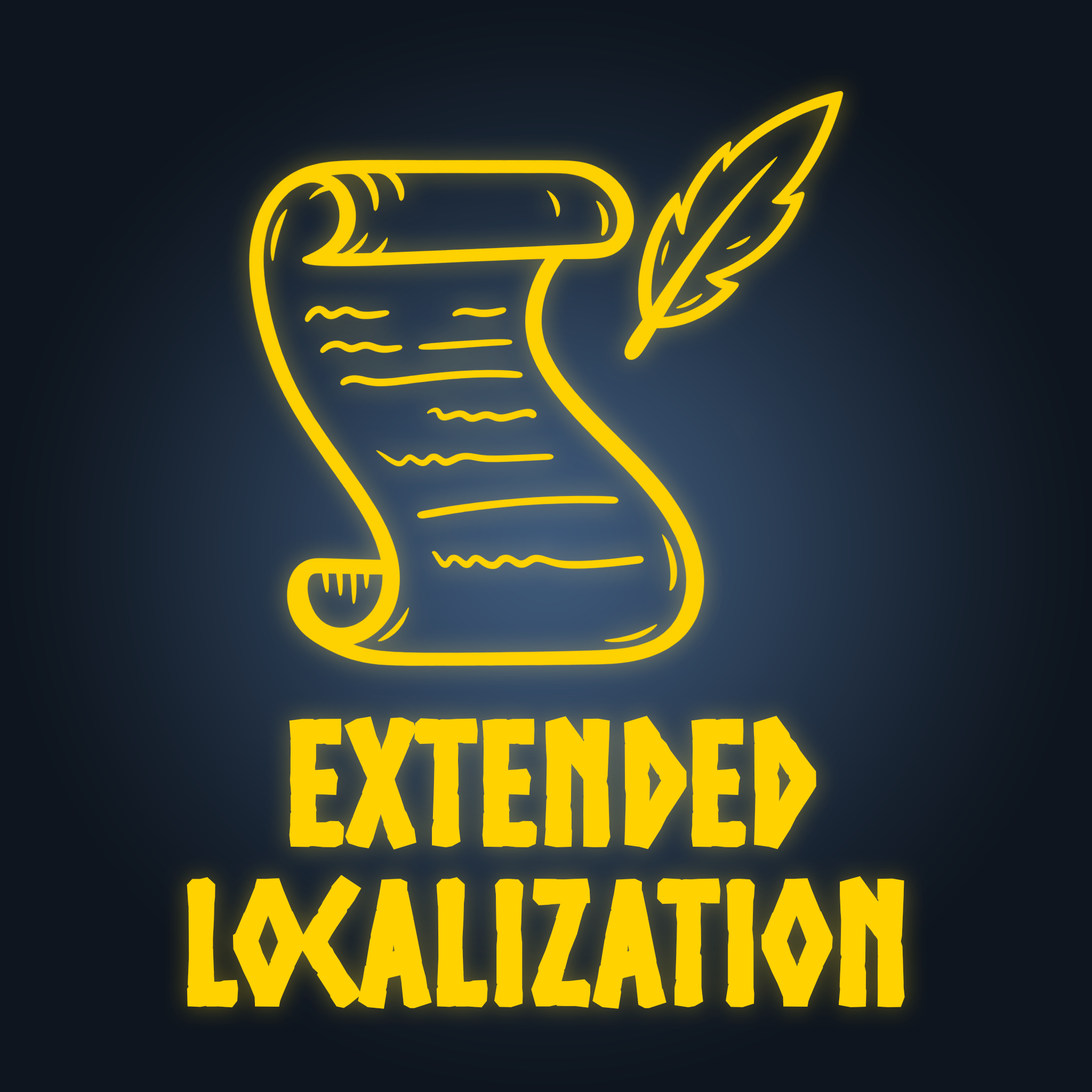
<style>
.page{position:relative;width:1092px;height:1092px;background:#0e151e}
.page>*{position:absolute;margin:0}
.t1{font:160px/160px "Norse-Bold";color:#ffd200;font-weight:bold}
</style>
<div class="page">
<p class="t1" style="left:187px;top:716px;width:718px;height:293px;text-align:center">Extended<br>Localization</p>
</div>
